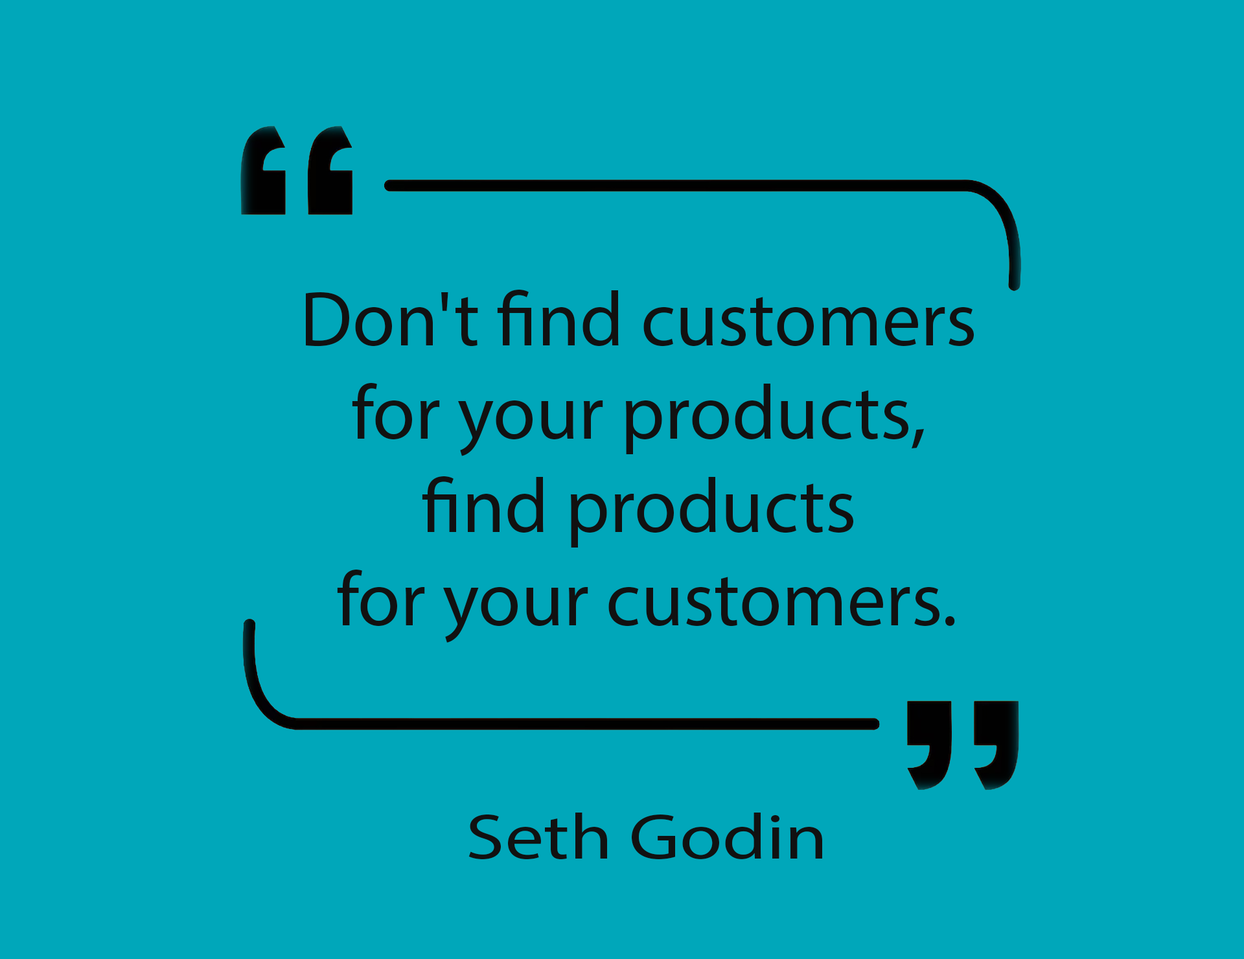
<style>
.page{position:relative;width:1244px;height:959px;background:#00a7ba}
.page>*{position:absolute;margin:0}
.t1{font:77.7px "MyriadPro-Regular";color:#111111}
.t2{font:64.8px "MyriadPro-Regular";color:#111111;scale:1.2 1}
</style>
<div class="page">
<p class="t1" style="left:306px;top:290px;width:668px;height:569px;text-align:center">Don't find customers <br>for your products, <br>find products <br>for your customers.<br><br> <br><span class="t2">Seth Godin</span></p>
</div>
